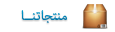
<style>
.page{position:relative;width:115px;height:32px;background:#ffffff}
.page>*{position:absolute;margin:0}
.t1{font:19px "AdobeArabic-Regular";color:#007db0}
</style>
<div class="page">
<p class="t1" style="left:21px;top:10px;width:46px;height:13px">منتجاتنــا</p>
</div>
